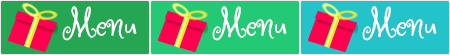
<style>
.page{position:relative;width:450px;height:55px;background:#23c975}
.page>*{position:absolute;margin:0}
.t1{font:42px "RugeBoogie-Regular";color:#ffffff}
</style>
<div class="page">
<p class="t1" style="left:62px;top:6px;width:75px;height:35px">Menu</p>
<p class="t1" style="left:212px;top:6px;width:75px;height:35px">Menu</p>
<p class="t1" style="left:362px;top:6px;width:75px;height:35px">Menu</p>
</div>
